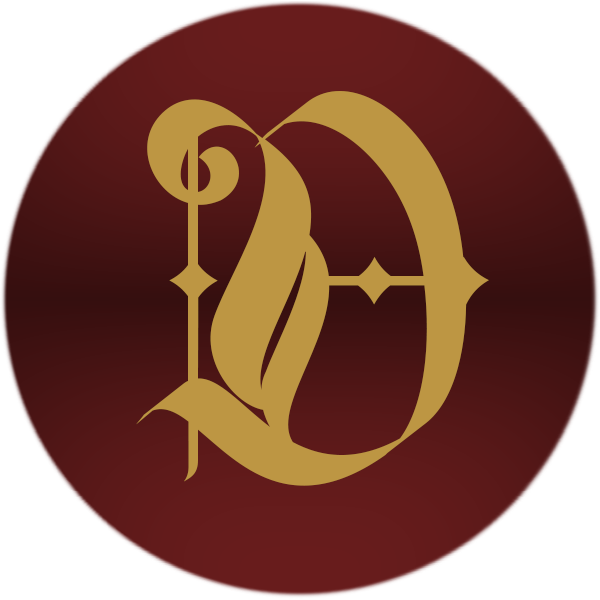
<style>
.page{position:relative;width:600px;height:600px;background:#ffffff}
.page>*{position:absolute;margin:0}
.t1{font:412.5px "TheCenturion";letter-spacing:0.18em;color:#bd9643}
</style>
<div class="page">
<p class="t1" style="left:136px;top:91px;width:353px;height:395px">D</p>
</div>
